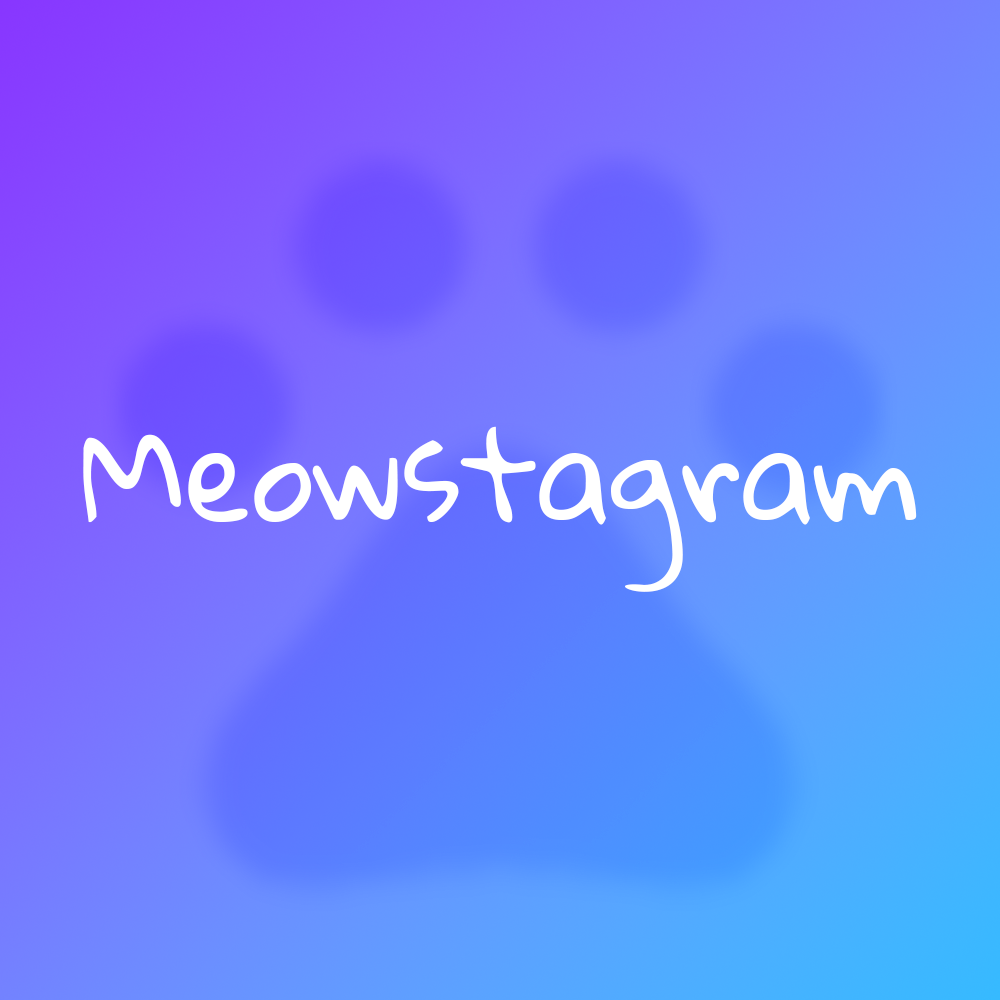
<style>
.page{position:relative;width:1000px;height:1000px}
.page>*{position:absolute;margin:0}
.t1{font:121.6px "GloriaHallelujah";color:#ffffff}
</style>
<div class="page">
<p class="t1" style="left:83px;top:426px;width:834px;height:166px">Meowstagram</p>
</div>
